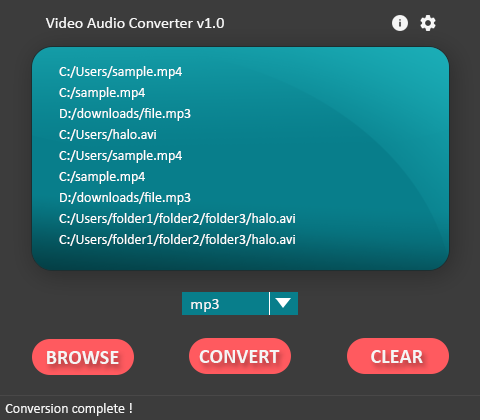
<style>
.page{position:relative;width:480px;height:420px;background:#3c3c3c}
.page>*{position:absolute;margin:0}
.t1{font:16px "Calibri";color:#f5f5f5}
.t2{font:14px/21px "Calibri";color:#ffffff}
.t3{font:20.2px "Calibri-Bold";color:#f5f5f5}
.t4{font:14px "Calibri";color:#f5f5f5}
</style>
<div class="page">
<p class="t1" style="left:45px;top:17px;width:179px;height:11px">Video Audio Converter v1.0</p>
<p class="t2" style="left:59px;top:66px;width:236px;height:180px">C:/Users/sample.mp4<br>C:/sample.mp4<br>D:/downloads/file.mp3<br>C:/Users/halo.avi<br>C:/Users/sample.mp4<br>C:/sample.mp4<br>D:/downloads/file.mp3<br>C:/Users/folder1/folder2/folder3/halo.avi<br>C:/Users/folder1/folder2/folder3/halo.avi</p>
<p class="t1" style="left:191px;top:299px;width:28px;height:13px">mp3</p>
<p class="t3" style="left:47px;top:351px;width:72px;height:13px">BROWSE</p>
<p class="t3" style="left:199px;top:350px;width:81px;height:13px">CONVERT</p>
<p class="t3" style="left:371px;top:350px;width:52px;height:13px">CLEAR</p>
<p class="t4" style="left:5px;top:403px;width:127px;height:13px">Conversion complete !</p>
</div>
